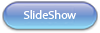
<style>
.page{position:relative;width:100px;height:33px}
.page>*{position:absolute;margin:0}
.t1{font:11.9px "MyriadPro-Regular";color:#ffffff}
</style>
<div class="page">
<p class="t1" style="left:23px;top:10px;width:53px;height:9px">SlideShow</p>
</div>
